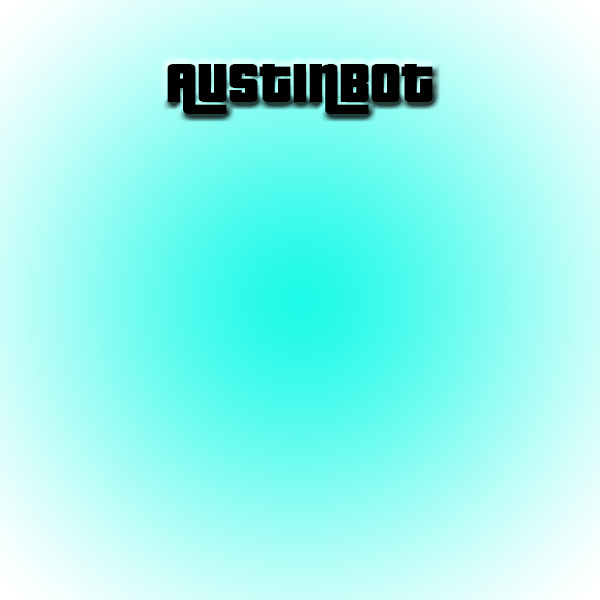
<style>
.page{position:relative;width:600px;height:600px}
.page>*{position:absolute;margin:0}
.t1{font:60px "PricedownBl-Regular";color:#010101}
</style>
<div class="page">
<p class="t1" style="left:167px;top:64px;width:266px;height:50px">AUSTINBOT</p>
</div>
